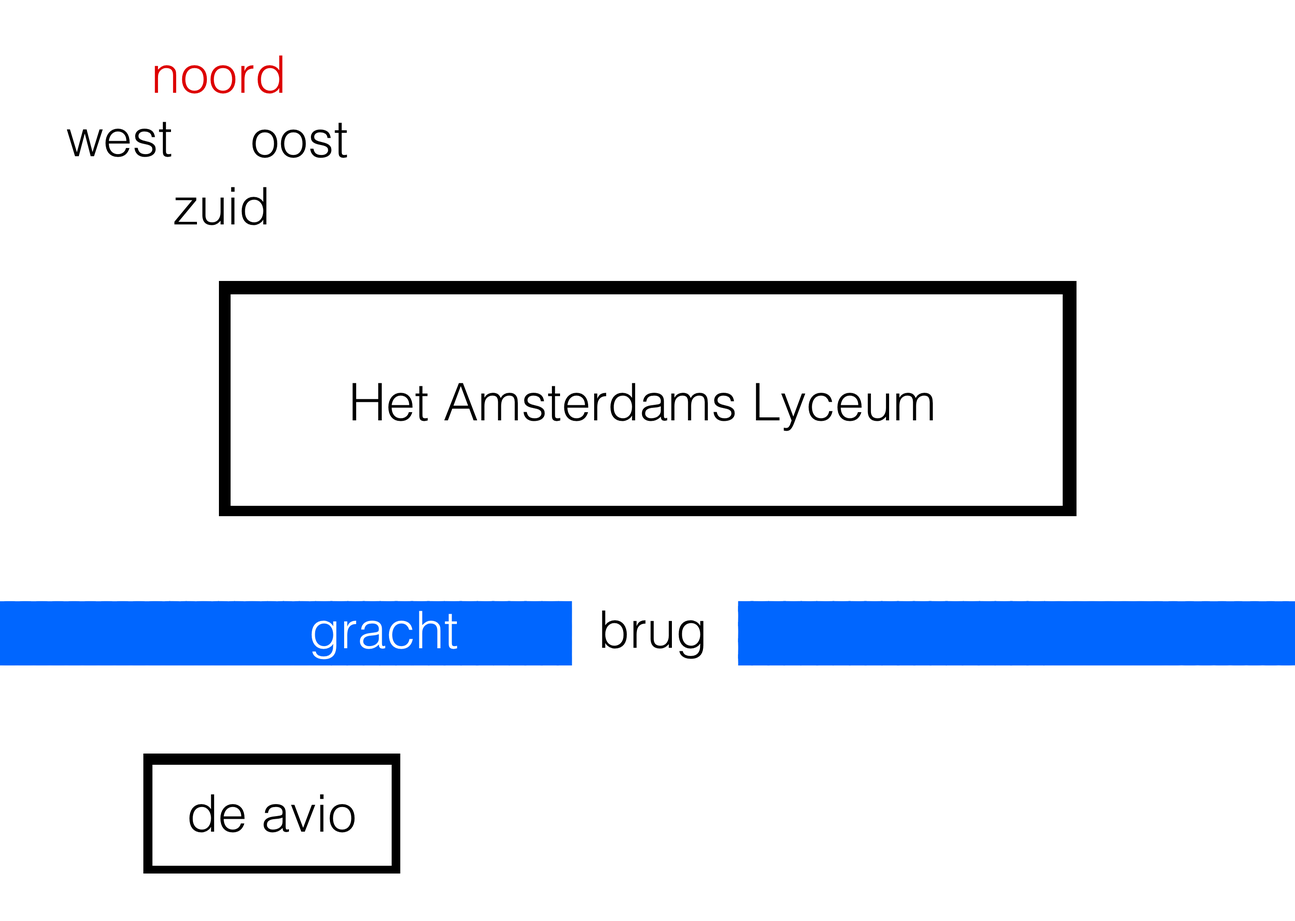
<style>
.page{position:relative;width:1295px;height:921px;background:#ffffff}
.page>*{position:absolute;margin:0}
.t1{font:51.8px "Helvetica-Light";color:#dd0000}
.t2{font:51.8px "Helvetica-Light";color:#000000}
.t3{font:51.8px "Helvetica-Light";color:#ffffff}
</style>
<div class="page">
<p class="t1" style="left:155px;top:55px;width:127px;height:39px">noord</p>
<p class="t2" style="left:67px;top:122px;width:104px;height:35px">west</p>
<p class="t2" style="left:252px;top:123px;width:95px;height:35px">oost</p>
<p class="t2" style="left:174px;top:187px;width:92px;height:38px">zuid</p>
<p class="t2" style="left:352px;top:383px;width:581px;height:48px">Het Amsterdams Lyceum</p>
<p class="t3" style="left:311px;top:611px;width:146px;height:49px">gracht</p>
<p class="t2" style="left:602px;top:610px;width:101px;height:49px">brug</p>
<p class="t2" style="left:189px;top:794px;width:166px;height:39px">de avio</p>
</div>
